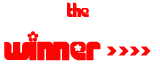
<style>
.page{position:relative;width:160px;height:64px;background:#ffffff}
.page>*{position:absolute;margin:0}
.t1{font:36px "Chick";color:#ff0404}
.t2{font:18px "Chick";color:#ff0404}
</style>
<div class="page">
<p class="t1" style="left:4px;top:2px;width:147px;height:59px;text-align:center"><span class="t2">the<br></span>winner &gt;&gt;&gt;&gt;</p>
</div>
